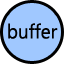
<style>
.page{position:relative;width:64px;height:64px;background:#a0c8ff}
.page>*{position:absolute;margin:0}
.t1{font:20px "SegoeUISymbol";color:#000000;scale:0.95 1}
</style>
<div class="page">
<p class="t1" style="left:8px;top:23px;width:50px;height:16px">buffer</p>
</div>
